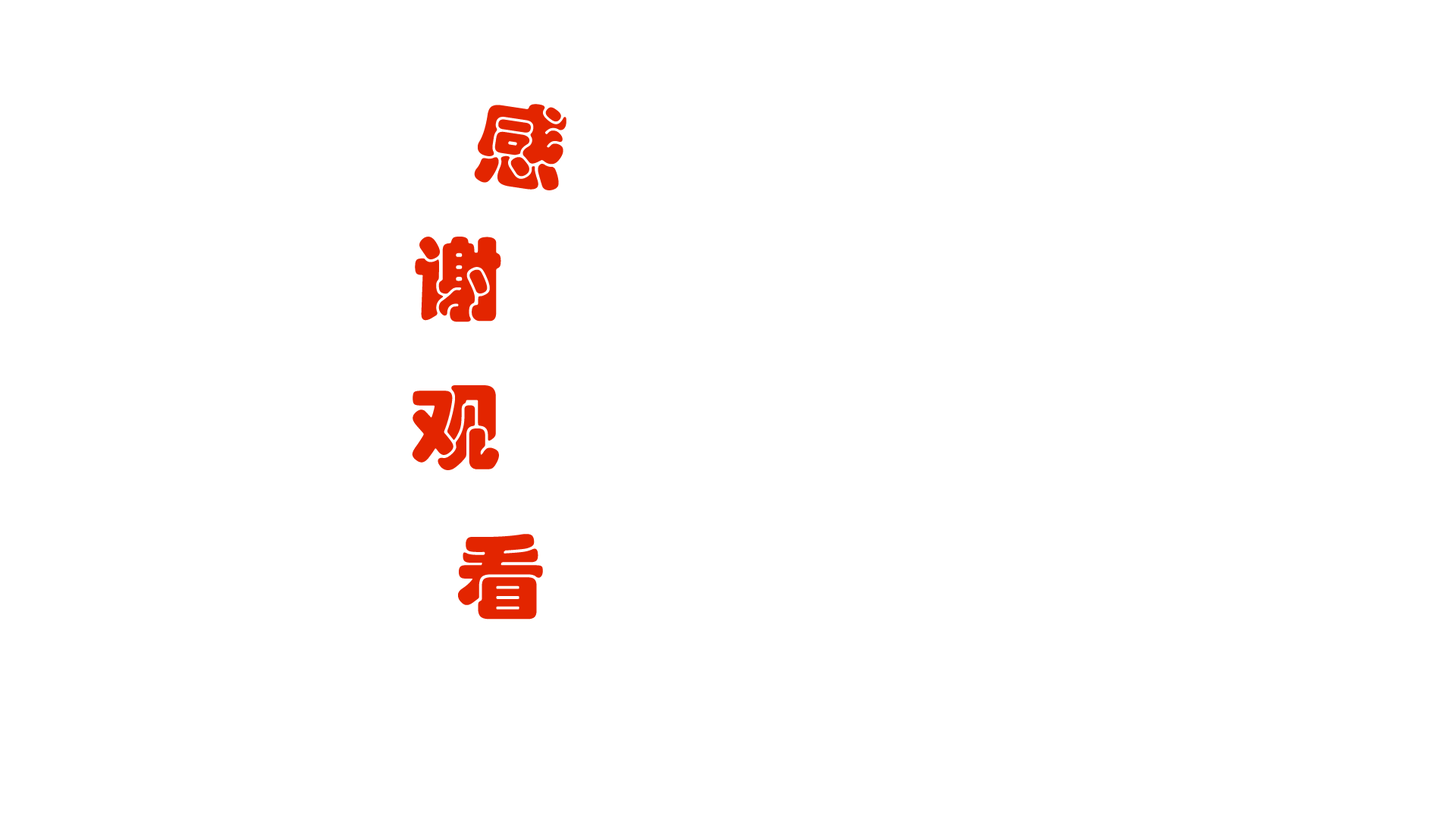
<style>
.page{position:relative;width:1456px;height:819px;background:#ffffff}
.page>*{position:absolute;margin:0}
.t1{font:91px "STHupo";color:#e32500}
</style>
<div class="page">
<p class="t1" style="left:474px;top:104px;width:92px;height:86px;rotate:9deg">感</p>
<p class="t1" style="left:415px;top:237px;width:86px;height:85px">谢</p>
<p class="t1" style="left:412px;top:385px;width:87px;height:85px">观</p>
<p class="t1" style="left:458px;top:534px;width:85px;height:86px">看</p>
</div>
